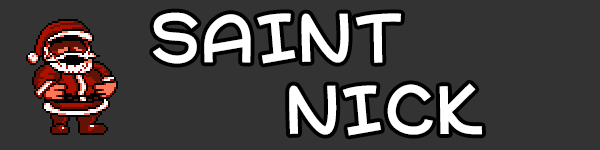
<style>
.page{position:relative;width:600px;height:150px;background:#333333}
.page>*{position:absolute;margin:0}
.t1{font:60px "WarioWareInc";letter-spacing:0.05em;color:#ffffff}
</style>
<div class="page">
<p class="t1" style="left:153px;top:12px;width:329px;height:124px">SAINT<br>     NICK</p>
</div>
